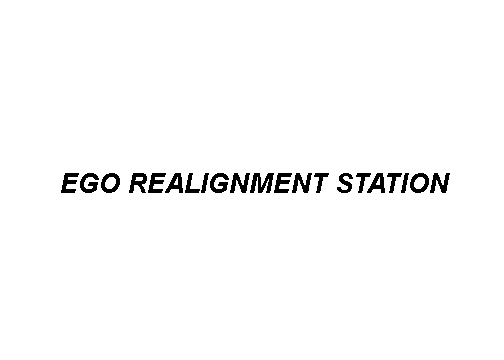
<style>
.page{position:relative;width:504px;height:360px;background:#ffffff}
.page>*{position:absolute;margin:0}
.t1{font:26.8px "Arial-BoldItalicMT";color:#000000}
</style>
<div class="page">
<p class="t1" style="left:61px;top:173px;width:389px;height:20px">EGO REALIGNMENT STATION</p>
</div>
